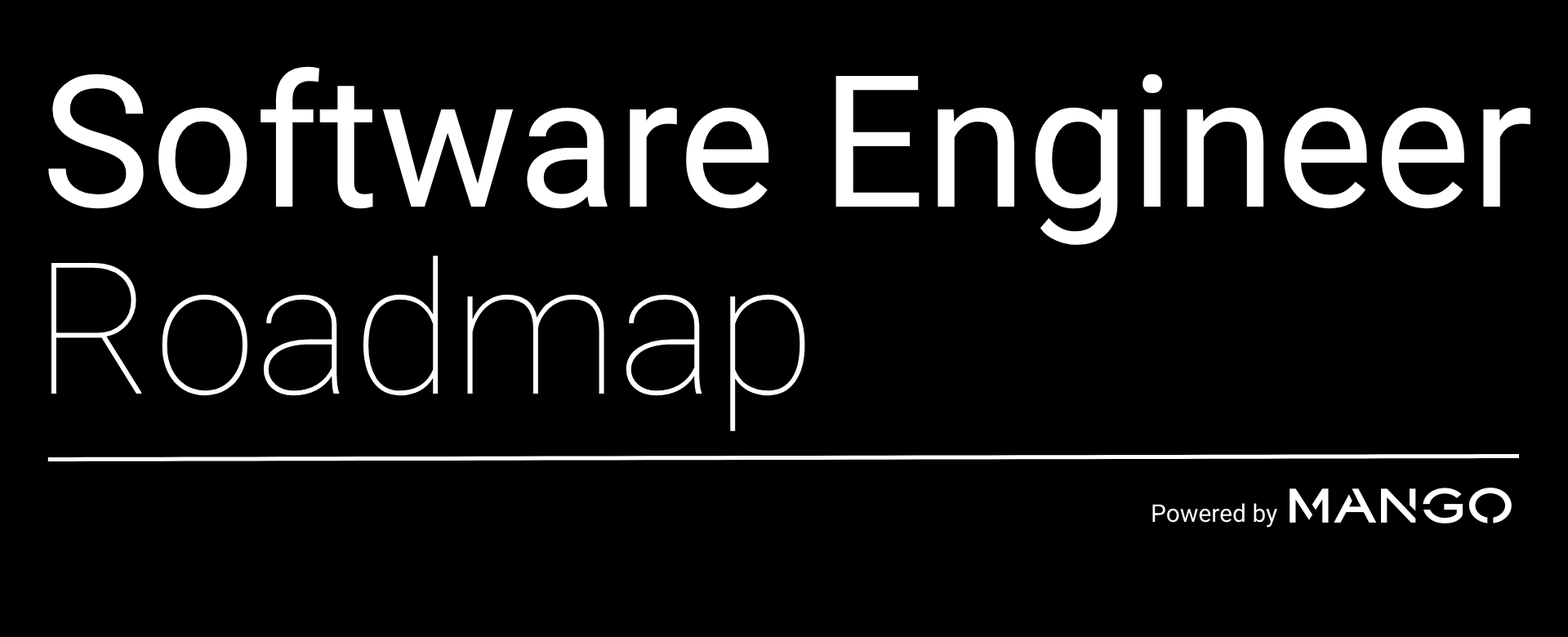
<style>
.page{position:relative;width:1568px;height:637px;background:#000000}
.page>*{position:absolute;margin:0}
.t1{font:183.9px "Roboto-Regular";color:#ffffff}
.t2{font:183.9px "Roboto-Thin";color:#ffffff}
.t3{font:24.5px "Roboto-Regular";color:#ffffff}
</style>
<div class="page">
<p class="t1" style="left:48px;top:66px;width:1482px;height:179px">Software Engineer</p>
<p class="t2" style="left:51px;top:256px;width:754px;height:175px">Roadmap</p>
<p class="t3" style="left:1152px;top:503px;width:125px;height:25px">Powered by</p>
</div>
